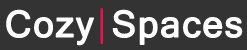
<style>
.page{position:relative;width:247px;height:50px;background:#333333}
.page>*{position:absolute;margin:0}
.t1{font:35.3px "Kartika";letter-spacing:0.025em;color:#ffffff;font-weight:bold}
</style>
<div class="page">
<p class="t1" style="left:6px;top:9px;width:88px;height:37px">Cozy</p>
<p class="t1" style="left:112px;top:9px;width:131px;height:36px">Spaces</p>
</div>
